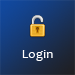
<style>
.page{position:relative;width:75px;height:75px}
.page>*{position:absolute;margin:0}
.t1{font:13.5px "Candara";color:#ffffff}
</style>
<div class="page">
<p class="t1" style="left:22px;top:50px;width:31px;height:11px">Login</p>
</div>
